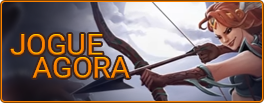
<style>
.page{position:relative;width:264px;height:103px}
.page>*{position:absolute;margin:0}
.t1{font:30.1px/22.4px "Roboto-Regular";color:#ff8400}
</style>
<div class="page">
<p class="t1" style="left:10px;top:34px;width:120px;height:44px;text-align:center">JOGUE<br>      AGORA</p>
</div>
